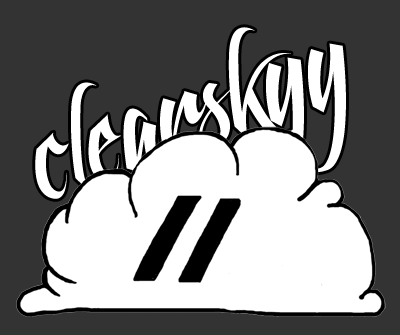
<style>
.page{position:relative;width:400px;height:335px;background:#333333}
.page>*{position:absolute;margin:0}
.t1{font:116.5px "FeathergraphyClean";color:#ffffff}
</style>
<div class="page">
<p class="t1" style="left:35px;top:27px;width:311px;height:172px;rotate:-18deg">clearskyy</p>
</div>
